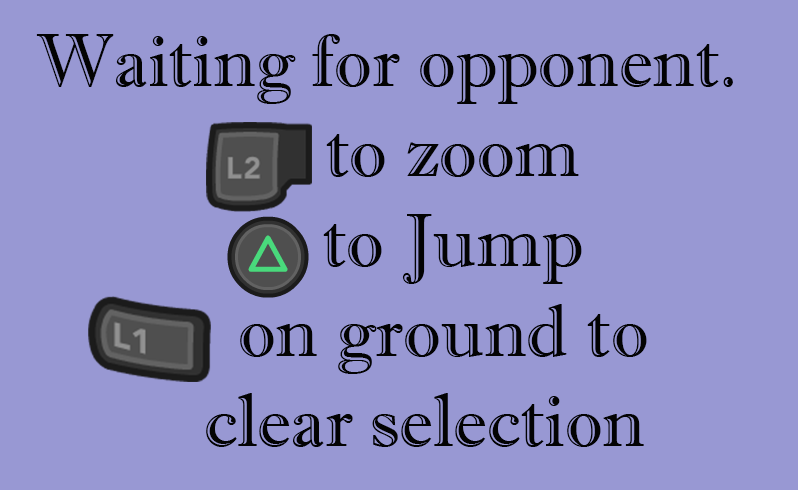
<style>
.page{position:relative;width:798px;height:490px;background:#9898d3}
.page>*{position:absolute;margin:0}
.t1{font:74.8px "ImprintMT-Shadow";color:#030303}
</style>
<div class="page">
<p class="t1" style="left:36px;top:34px;width:697px;height:413px;text-align:center">Waiting for opponent.<br>       to zoom<br>       to Jump<br>       on ground to <br>    clear selection</p>
</div>
